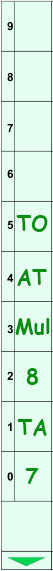
<style>
.page{position:relative;width:53px;height:571px;background:#e5fff0}
.page>*{position:absolute;margin:0}
.t1{font:21.4px "ComicSansMS-Bold";color:#00900d}
</style>
<div class="page">
<p class="t1" style="left:16px;top:215px;width:32px;height:17px">TO</p>
<p class="t1" style="left:17px;top:269px;width:30px;height:17px">AT</p>
<p class="t1" style="left:15px;top:318px;width:35px;height:17px">Mul</p>
<p class="t1" style="left:26px;top:368px;width:12px;height:17px">8</p>
<p class="t1" style="left:17px;top:419px;width:30px;height:17px">TA</p>
<p class="t1" style="left:25px;top:468px;width:14px;height:16px">7</p>
</div>
